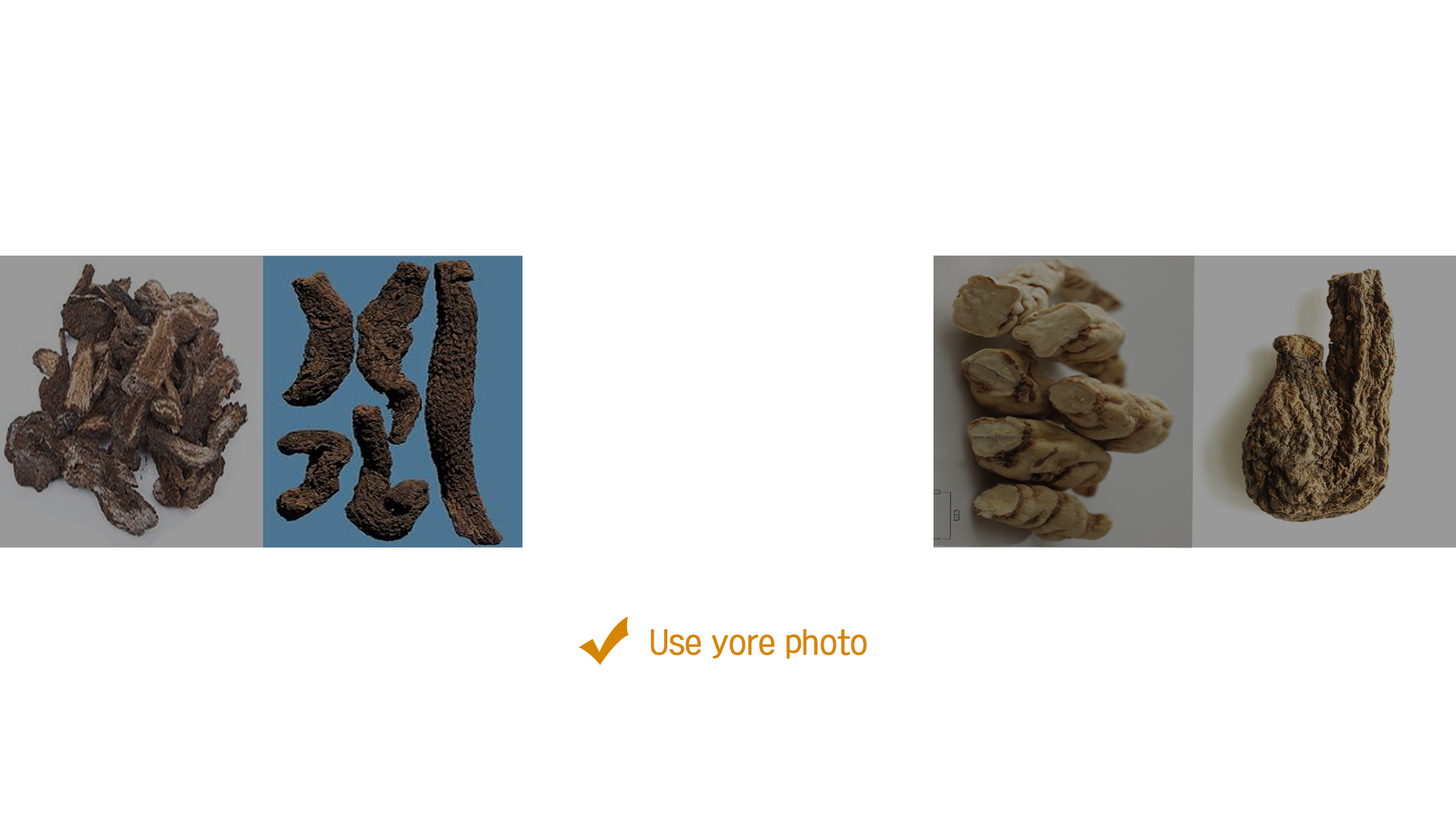
<style>
.page{position:relative;width:1456px;height:819px;background:#ffffff}
.page>*{position:absolute;margin:0}
.t1{font:30.3px "KoreanNGL2-R";color:#d68500}
</style>
<div class="page">
<p class="t1" style="left:651px;top:629px;width:216px;height:30px">Use yore photo</p>
</div>
